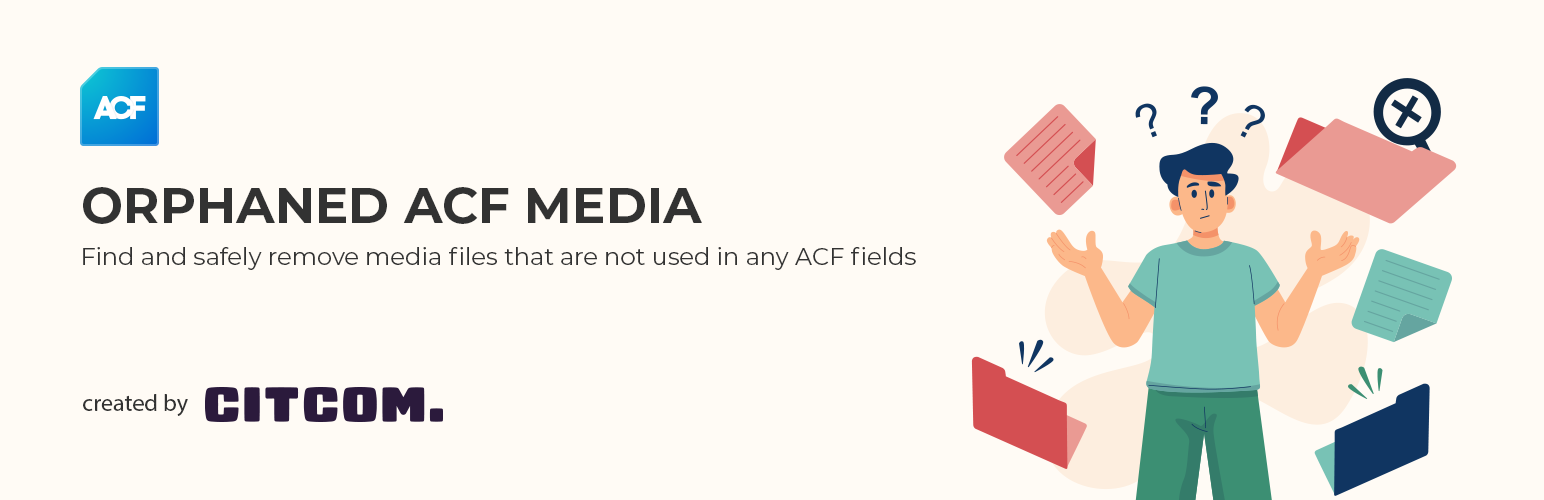
<style>
.page{position:relative;width:1544px;height:500px;background:#fffbf5}
.page>*{position:absolute;margin:0}
.t1{font:50px "Montserrat-Bold";color:#323232;text-transform:uppercase}
.t2{font:24px "Montserrat-Regular";color:#323232}
.t3{font:24px "MyriadPro-Regular";color:#323232}
</style>
<div class="page">
<p class="t1" style="left:83px;top:187px;width:619px;height:37px">Orphaned ACF Media</p>
<p class="t2" style="left:83px;top:247px;width:833px;height:23px">Find and safely remove media files that are not used in any ACF fields</p>
<p class="t3" style="left:83px;top:394px;width:105px;height:22px">created by</p>
</div>
